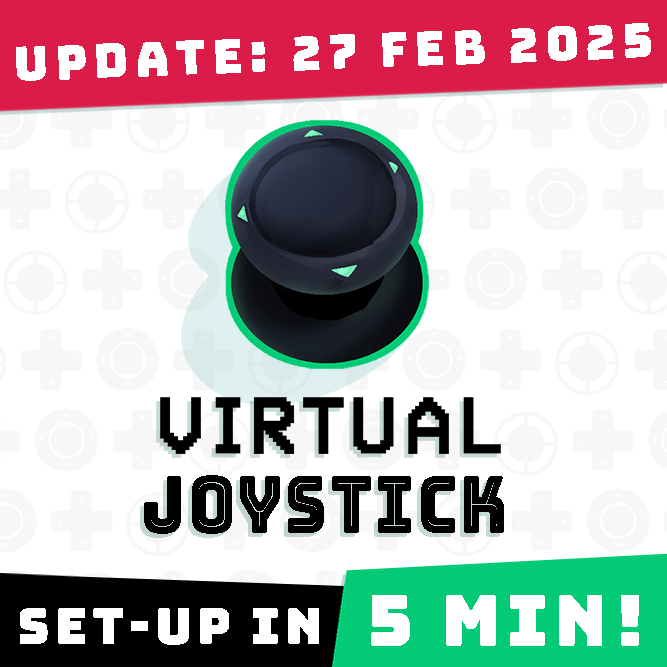
<style>
.page{position:relative;width:667px;height:667px;background:#ffffff}
.page>*{position:absolute;margin:0}
.t1{font:47.1px "Bungee-Regular";letter-spacing:0.138em;color:#ffffff}
.t2{font:79px "Bungee-Inline";letter-spacing:0.04em;color:#000000;scale:0.82 1}
.t3{font:70.7px "Bungee-Regular";letter-spacing:0.08em;color:#ffffff}
.t4{font:50px "Bungee-Regular";letter-spacing:0.08em;color:#ffffff}
</style>
<div class="page">
<p class="t1" style="left:16px;top:23px;width:635px;height:58px;rotate:-2deg">UPDATE: 27 Feb 2025</p>
<p class="t2" style="left:144px;top:475px;width:360px;height:59px">joystick</p>
<p class="t3" style="left:371px;top:595px;width:268px;height:51px">5 min!</p>
<p class="t4" style="left:20px;top:608px;width:299px;height:37px">set-up in</p>
</div>
